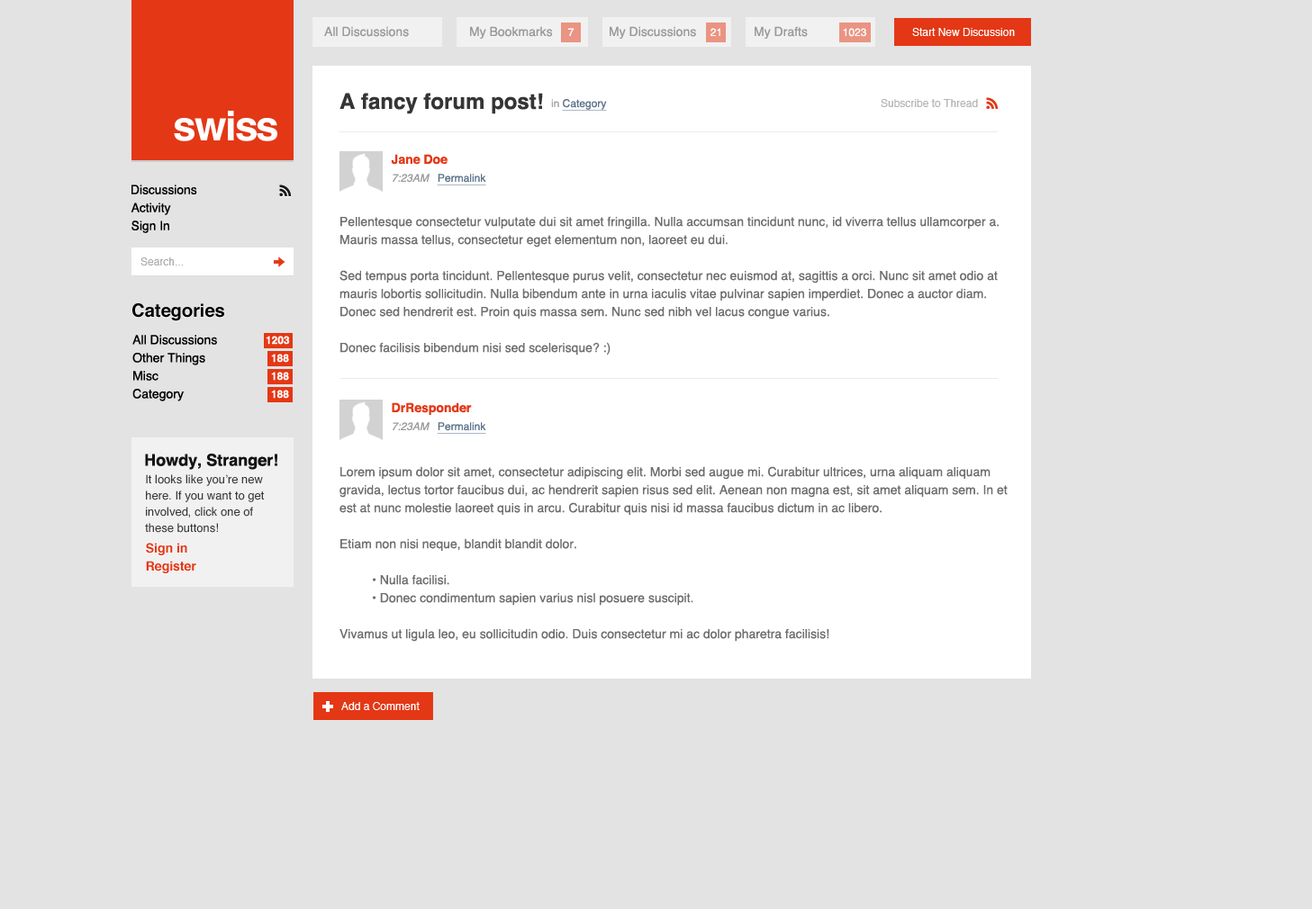
<style>
.page{position:relative;width:1312px;height:909px;background:#e3e3e3}
.page>*{position:absolute;margin:0}
.t1{font:12.6px "Helvetica";color:#9a9a9a}
.t2{font:10.8px "Helvetica";color:#ffffff}
.t3{font:21.6px "Helvetica-Bold";color:#353535}
.t4{font:10.8px "Helvetica";color:#5c7389;text-decoration:underline}
.t5{font:10.8px "Helvetica";color:#a3a3a3}
.t6{font:10.8px "Helvetica";color:#b5b4b4}
.t7{font:41.2px "Helvetica-Bold";letter-spacing:-0.04em;color:#ffffff}
.t8{font:10.8px/18px "Helvetica";color:#5c7389;text-decoration:underline}
.t9{font:12.6px/18px "Helvetica-Bold";color:#e43715}
.t10{font:10.8px/18px "Helvetica-Oblique";color:#9b9b9b}
.t11{font:12.6px/18px "Helvetica";color:#000000}
.t12{font:12.6px/18px "Helvetica";color:#6e6e6e}
.t13{font:10.8px "Helvetica";color:#adadad}
.t14{font:18px "Helvetica-Bold";color:#000000}
.t15{font:10.8px "Helvetica-Bold";color:#ffffff}
.t16{font:16.2px "Helvetica-Bold";color:#141414}
.t17{font:11.7px/16.2px "Helvetica";color:#393939}
</style>
<div class="page">
<p class="t1" style="left:324px;top:26px;width:85px;height:11px">All Discussions</p>
<p class="t1" style="left:470px;top:26px;width:83px;height:14px">My Bookmarks</p>
<p class="t2" style="left:568px;top:28px;width:6px;height:8px">7</p>
<p class="t1" style="left:609px;top:26px;width:87px;height:14px">My Discussions</p>
<p class="t2" style="left:710px;top:28px;width:10px;height:8px">21</p>
<p class="t1" style="left:754px;top:26px;width:53px;height:14px">My Drafts</p>
<p class="t2" style="left:843px;top:28px;width:23px;height:9px">1023</p>
<p class="t2" style="left:912px;top:28px;width:102px;height:8px">Start New Discussion</p>
<p class="t3" style="left:339px;top:93px;width:204px;height:21px">A fancy forum post!</p>
<p class="t4" style="left:551px;top:99px;width:56px;height:12px"><span class="t5">in </span>Category</p>
<p class="t6" style="left:880px;top:99px;width:98px;height:8px">Subscribe to Thread</p>
<p class="t7" style="left:174px;top:111px;width:103px;height:30px">swiss</p>
<p class="t8" style="left:391px;top:154px;width:95px;height:31px"><span class="t9">Jane Doe    <br></span><span class="t10">7:23AM   </span>Permalink</p>
<p class="t11" style="left:131px;top:185px;width:66px;height:48px">Discussions<br>Activity<br>Sign In</p>
<p class="t12" style="left:339px;top:216px;width:659px;height:140px">Pellentesque consectetur vulputate dui sit amet fringilla. Nulla accumsan tincidunt nunc, id viverra tellus ullamcorper a. Mauris massa tellus, consectetur eget elementum non, laoreet eu dui. <br><br>Sed tempus porta tincidunt. Pellentesque purus velit, consectetur nec euismod at, sagittis a orci. Nunc sit amet odio at mauris lobortis sollicitudin. Nulla bibendum ante in urna iaculis vitae pulvinar sapien imperdiet. Donec a auctor diam. Donec sed hendrerit est. Proin quis massa sem. Nunc sed nibh vel lacus congue varius. <br><br>Donec facilisis bibendum nisi sed scelerisque? :)</p>
<p class="t13" style="left:140px;top:257px;width:44px;height:9px">Search...</p>
<p class="t14" style="left:132px;top:303px;width:92px;height:18px">Categories</p>
<p class="t11" style="left:132px;top:335px;width:85px;height:66px">All Discussions<br>Other Things<br>Misc<br>Category</p>
<p class="t15" style="left:266px;top:336px;width:24px;height:9px">1203</p>
<p class="t15" style="left:271px;top:354px;width:18px;height:9px">188</p>
<p class="t15" style="left:271px;top:372px;width:18px;height:9px">188</p>
<p class="t15" style="left:271px;top:390px;width:18px;height:9px">188</p>
<p class="t9" style="left:392px;top:402px;width:94px;height:32px">DrResponder    <br><span class="t10">7:23AM   </span><span class="t8">Permalink</span></p>
<p class="t16" style="left:145px;top:454px;width:132px;height:16px">Howdy, Stranger!</p>
<p class="t12" style="left:339px;top:466px;width:668px;height:176px">Lorem ipsum dolor sit amet, consectetur adipiscing elit. Morbi sed augue mi. Curabitur ultrices, urna aliquam aliquam gravida, lectus tortor faucibus dui, ac hendrerit sapien risus sed elit. Aenean non magna est, sit amet aliquam sem. In et est at nunc molestie laoreet quis in arcu. Curabitur quis nisi id massa faucibus dictum in ac libero. <br><br>Etiam non nisi neque, blandit blandit dolor. <br><br> • Nulla facilisi. <br> • Donec condimentum sapien varius nisl posuere suscipit. <br><br>Vivamus ut ligula leo, eu sollicitudin odio. Duis consectetur mi ac dolor pharetra facilisis!</p>
<p class="t17" style="left:145px;top:474px;width:119px;height:59px">It looks like you’re new here. If you want to get involved, click one of these buttons!</p>
<p class="t9" style="left:146px;top:543px;width:50px;height:30px">Sign in <br>Register</p>
<p class="t2" style="left:341px;top:702px;width:78px;height:8px">Add a Comment</p>
</div>
